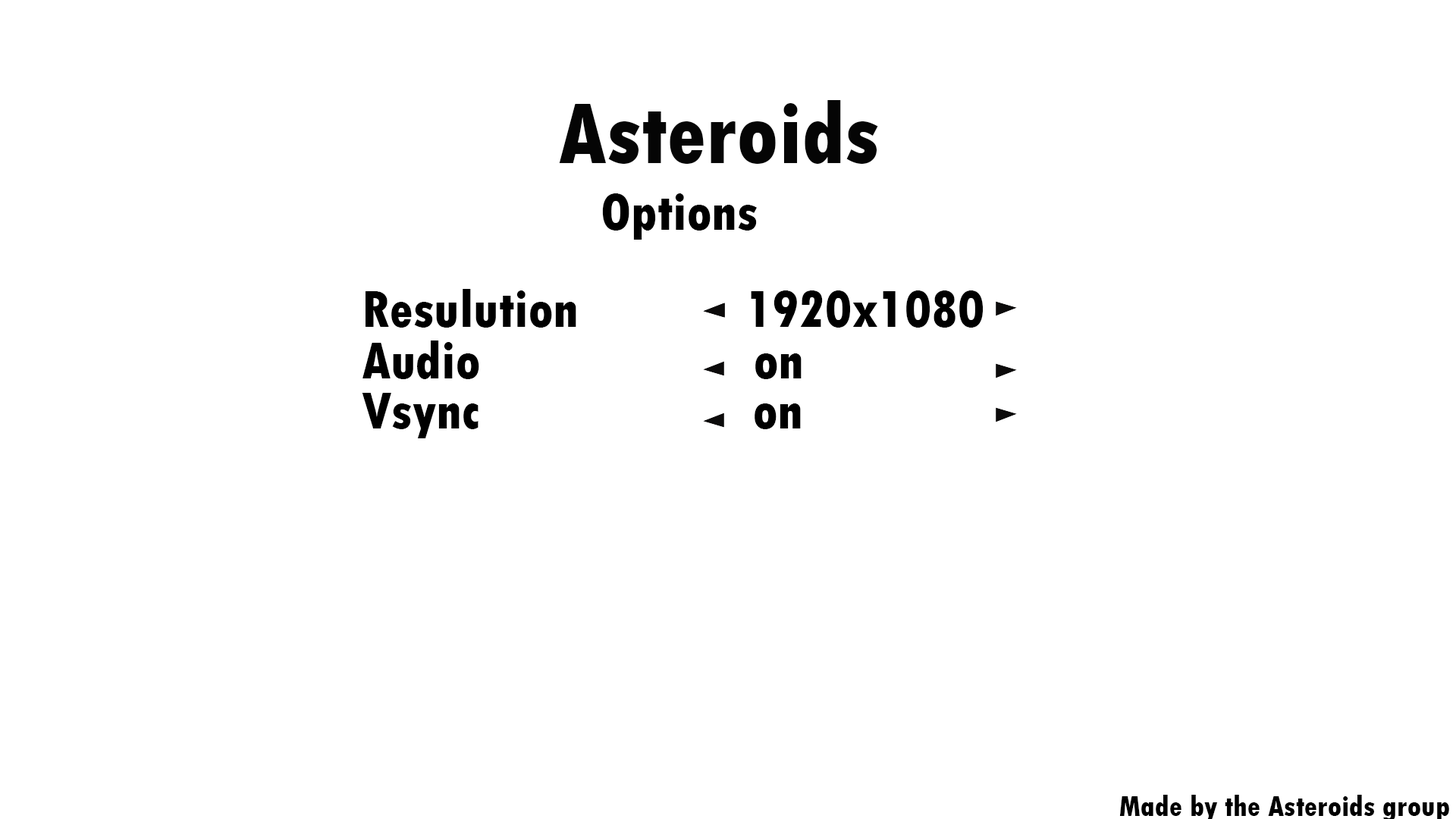
<style>
.page{position:relative;width:1456px;height:819px;background:#ffffff}
.page>*{position:absolute;margin:0}
.t1{font:91px "TwCenMT-CondensedExtraBold";color:#000000}
.t2{font:54.6px "TwCenMT-CondensedExtraBold";color:#000000}
</style>
<div class="page">
<p class="t1" style="left:559px;top:100px;width:319px;height:64px">Asteroids</p>
<p class="t2" style="left:602px;top:193px;width:155px;height:47px">Options</p>
<p class="t2" style="left:366px;top:289px;width:210px;height:39px">Resulution</p>
<p class="t2" style="left:751px;top:290px;width:232px;height:38px">1920x1080</p>
<p class="t2" style="left:362px;top:340px;width:117px;height:39px">Audio</p>
<p class="t2" style="left:755px;top:353px;width:47px;height:26px">on</p>
<p class="t2" style="left:362px;top:393px;width:117px;height:45px">Vsync</p>
<p class="t2" style="left:755px;top:403px;width:46px;height:26px">on</p>
</div>
